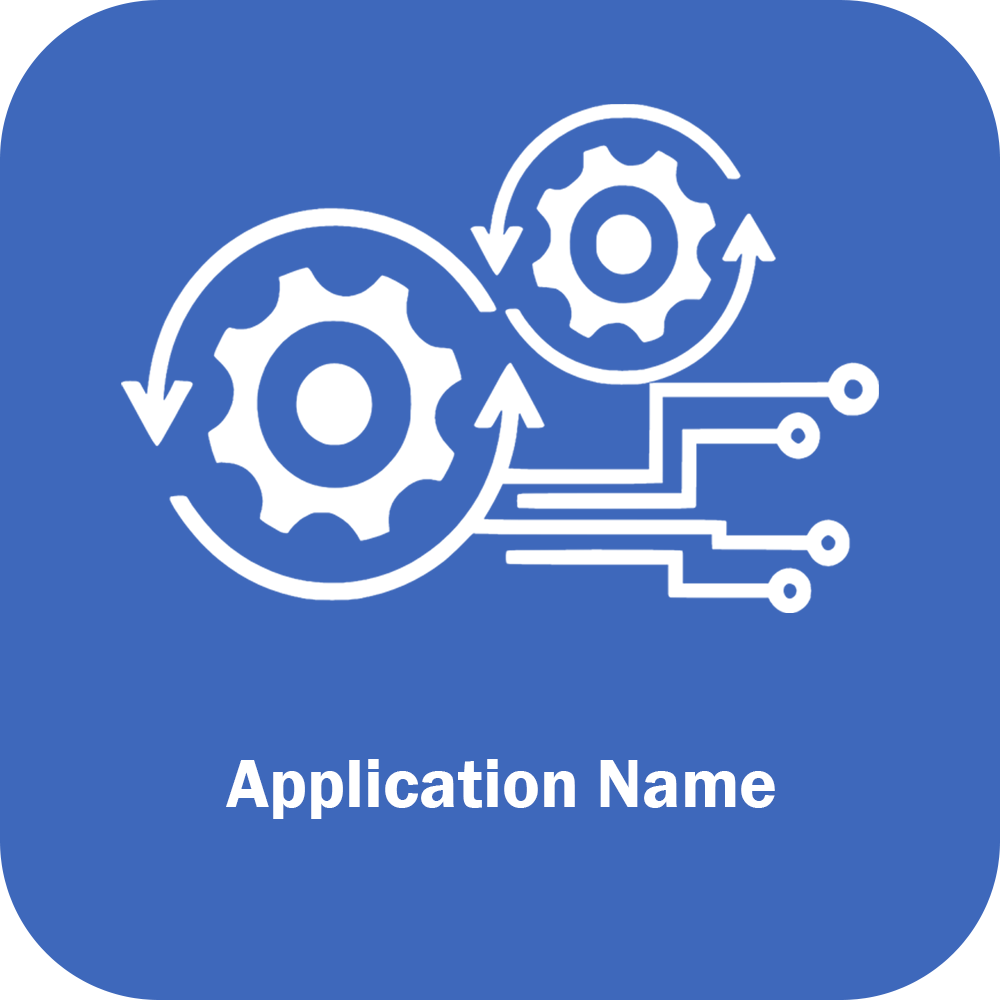
<style>
.page{position:relative;width:1000px;height:1000px;background:#3e68bb}
.page>*{position:absolute;margin:0}
.t1{font:71px "FranklinGothic-Demi";color:#ffffff}
</style>
<div class="page">
<p class="t1" style="left:226px;top:759px;width:549px;height:60px">Application Name</p>
</div>
